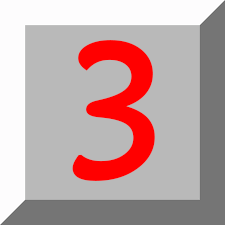
<style>
.page{position:relative;width:225px;height:225px;background:#b9b9b9}
.page>*{position:absolute;margin:0}
.t1{font:190.2px "MaiandraGD-Regular";color:#ff0000;font-weight:bold}
</style>
<div class="page">
<p class="t1" style="left:72px;top:40px;width:83px;height:141px">3</p>
</div>
